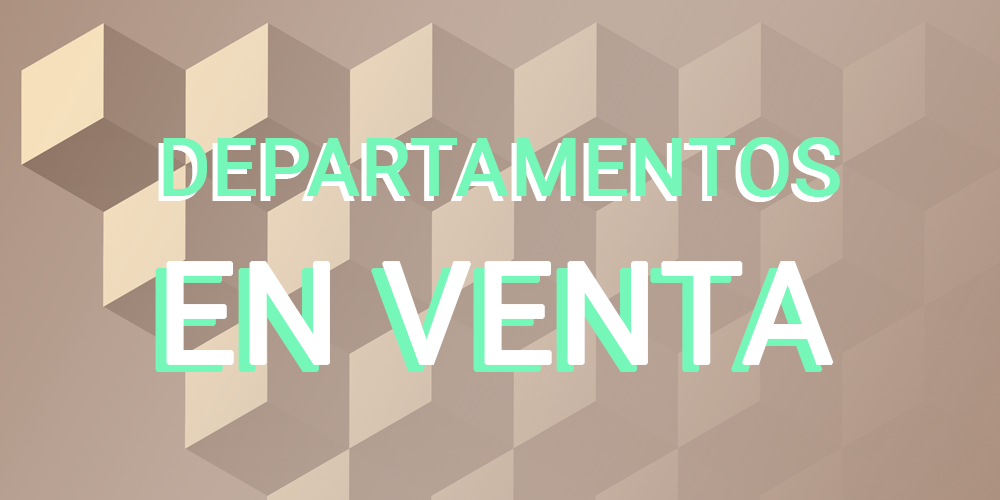
<style>
.page{position:relative;width:1000px;height:500px}
.page>*{position:absolute;margin:0}
.t1{font:80px "Roboto-Regular";color:#74f7b8;font-weight:bold}
.t2{font:80px "Roboto-Regular";font-weight:bold}
.t3{font:140px "Roboto-Regular";font-weight:bold}
.t4{font:140px "Roboto-Regular";color:#ffffff;font-weight:bold}
.t5{font:80px "Roboto-Regular";color:#ffffff;font-weight:bold}
</style>
<div class="page">
<p class="t1" style="left:163px;top:137px;width:677px;height:60px">DEPARTAMENTOS</p>
<p class="t2" style="left:158px;top:142px;width:677px;height:60px">DEPARTAMENTOS</p>
<p class="t3" style="left:155px;top:268px;width:668px;height:104px"><span class="t2"><br></span>EN VENTA</p>
<p class="t4" style="left:166px;top:261px;width:668px;height:104px"><span class="t5"><br></span>EN VENTA</p>
</div>
